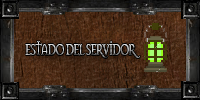
<style>
.page{position:relative;width:200px;height:100px}
.page>*{position:absolute;margin:0}
.t1{font:16.4px "Mason-Regular";letter-spacing:-0.1em;scale:0.66 1}
</style>
<div class="page">
<p class="t1" style="left:25px;top:41px;width:115px;height:17px">ESTADO DEL SERVIDOR</p>
</div>
